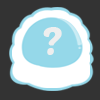
<style>
.page{position:relative;width:100px;height:100px;background:#333333}
.page>*{position:absolute;margin:0}
.t1{font:37.5px "PoetsenOne-Regular";color:#eeeeee}
</style>
<div class="page">
<p class="t1" style="left:43px;top:27px;width:19px;height:28px">?</p>
</div>
